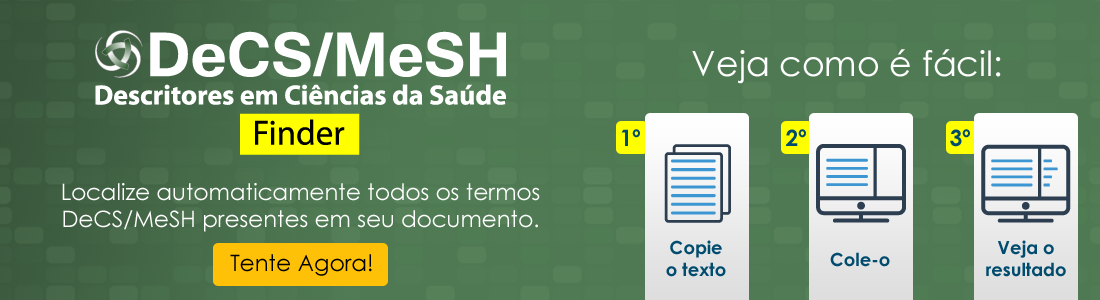
<style>
.page{position:relative;width:1100px;height:300px}
.page>*{position:absolute;margin:0}
.t1{font:34.8px "CenturyGothic";color:#ffffff}
.t2{font:22.8px "CenturyGothic-Bold";color:#014c6e}
.t3{font:22.8px "CenturyGothic";color:#ffffff}
.t4{font:18px "CenturyGothic-Bold";color:#014c6e}
.t5{font:22.8px "CenturyGothic";color:#000000}
</style>
<div class="page">
<p class="t1" style="left:692px;top:49px;width:309px;height:35px">Veja como é fácil:</p>
<p class="t2" style="left:621px;top:129px;width:19px;height:17px">1º</p>
<p class="t2" style="left:786px;top:129px;width:20px;height:17px">2º</p>
<p class="t2" style="left:950px;top:129px;width:20px;height:18px">3º</p>
<p class="t3" style="left:62px;top:183px;width:478px;height:49px;text-align:center">Localize automaticamente todos os termos DeCS/MeSH presentes em seu documento.</p>
<p class="t4" style="left:666px;top:240px;width:60px;height:37px;text-align:center">Copie<br>o texto</p>
<p class="t4" style="left:986px;top:240px;width:80px;height:37px;text-align:center">Veja o<br>resultado</p>
<p class="t5" style="left:230px;top:254px;width:142px;height:22px">Tente Agora!</p>
<p class="t4" style="left:830px;top:252px;width:60px;height:15px">Cole-o</p>
</div>
